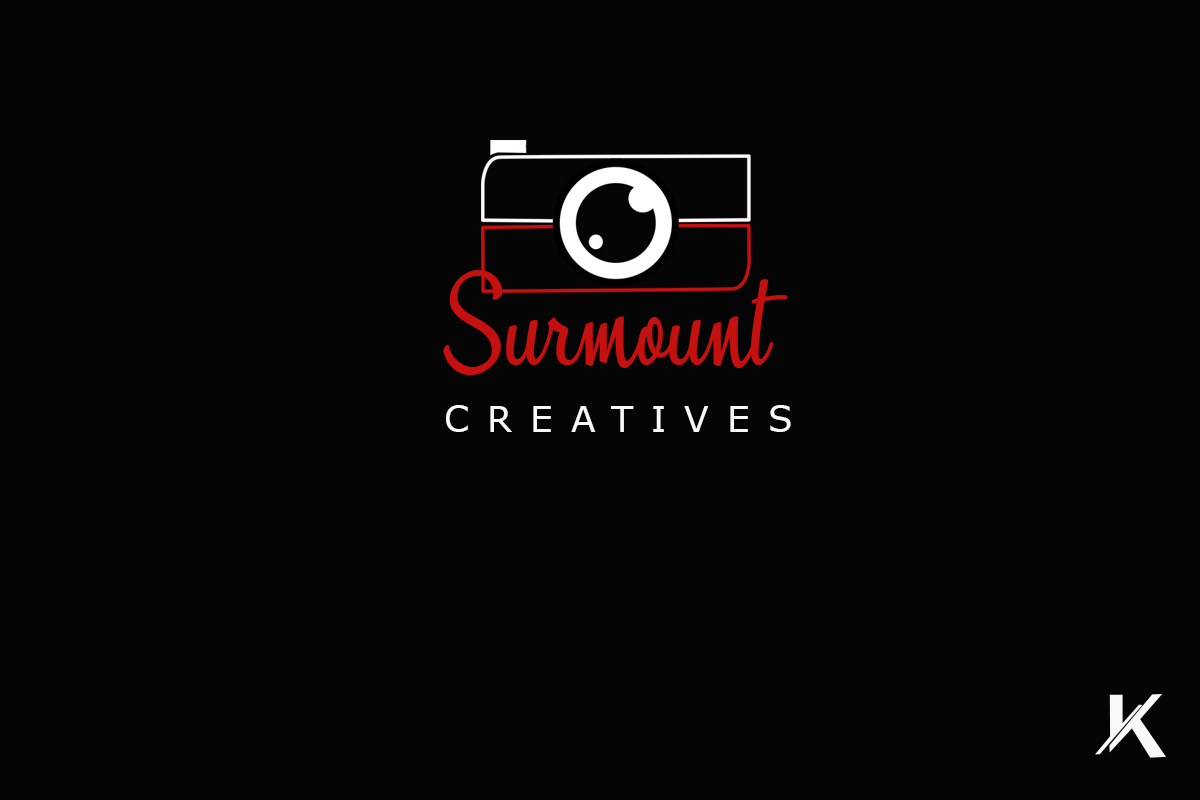
<style>
.page{position:relative;width:1200px;height:800px;background:#050505}
.page>*{position:absolute;margin:0}
.t1{font:83.1px "SunshineBoulevardPersonalUse";color:#c51010}
.t2{font:36px "VerdanaPro";letter-spacing:0.5em;color:#fbf8f8}
</style>
<div class="page">
<p class="t1" style="left:443px;top:270px;width:345px;height:105px">Surmount</p>
<p class="t2" style="left:446px;top:405px;width:345px;height:27px">CREATIVES</p>
</div>
